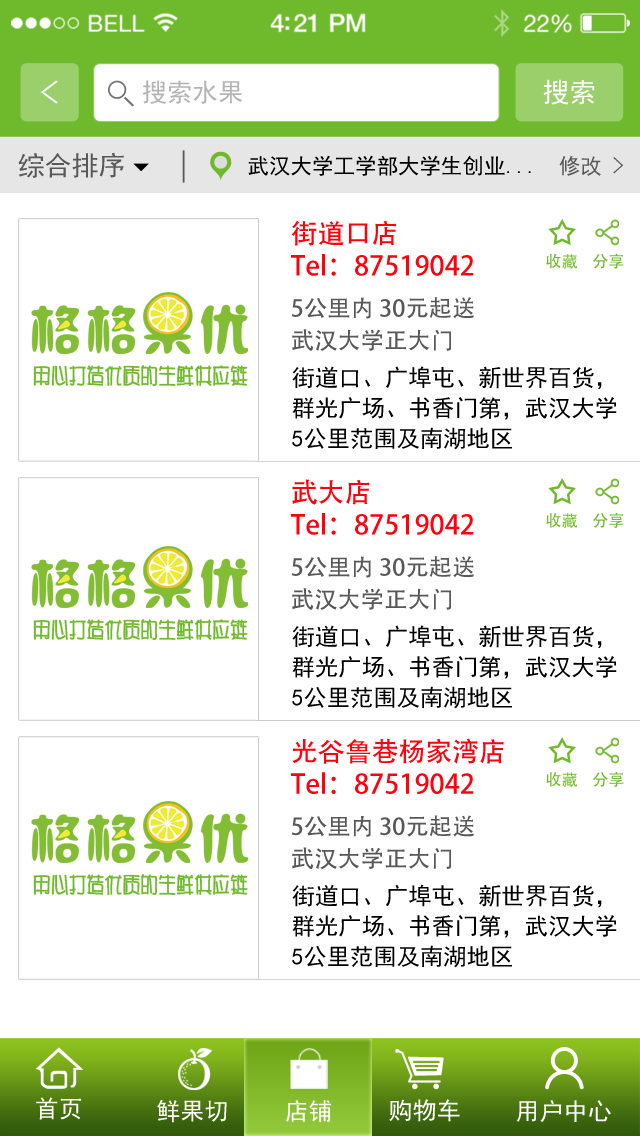
<style>
.page{position:relative;width:640px;height:1136px;background:#ffffff}
.page>*{position:absolute;margin:0}
.t1{font:32.3px "SimHei";color:#ffffff;scale:1.23 1}
.t2{font:25.5px "SimHei";color:#b4b4b4}
.t3{font:26.9px "SimHei";color:#ffffff}
.t4{font:26.9px "SimHei";color:#595757}
.t5{font:21.5px "SimHei";color:#000000}
.t6{font:21.5px "SimHei";color:#595757}
.t7{font:23.3px "SimHei";color:#595757}
.t8{font:26.9px "AdobeHeitiStd-Regular";color:#ff000c}
.t9{font:16.1px "AdobeHeitiStd-Regular";color:#6fba2c}
.t10{font:23.3px "AdobeHeitiStd-Regular";color:#595757}
.t11{font:21.5px "HYr2gj";color:#6fba2c;font-weight:bold;scale:0.81 1}
.t12{font:23.3px/30.5px "SimHei";color:#000000}
.t13{font:24.1px "SimHei";color:#ffffff}
</style>
<div class="page">
<p class="t1" style="left:40px;top:80px;width:18px;height:24px">&lt;</p>
<p class="t2" style="left:142px;top:80px;width:100px;height:24px">搜索水果</p>
<p class="t3" style="left:543px;top:79px;width:52px;height:26px">搜索</p>
<p class="t4" style="left:18px;top:152px;width:106px;height:26px">综合排序</p>
<p class="t5" style="left:248px;top:155px;width:283px;height:21px">武汉大学工学部大学生创业...</p>
<p class="t6" style="left:559px;top:155px;width:65px;height:21px">修改 <span class="t7">&gt;</span></p>
<p class="t8" style="left:291px;top:220px;width:183px;height:56px">街道口店  <br>Tel：87519042</p>
<p class="t9" style="left:546px;top:253px;width:32px;height:16px">收藏</p>
<p class="t9" style="left:593px;top:253px;width:31px;height:16px">分享</p>
<p class="t10" style="left:291px;top:297px;width:183px;height:22px">5公里内 30元起送</p>
<p class="t10" style="left:292px;top:329px;width:159px;height:22px">武汉大学正大门</p>
<p class="t11" style="left:33px;top:365px;width:215px;height:21px">用心打造优质的生鲜供应链</p>
<p class="t12" style="left:292px;top:366px;width:325px;height:84px">街道口、广埠屯、新世界百货，<br>群光广场、书香门第，武汉大学<br>5公里范围及南湖地区</p>
<p class="t8" style="left:291px;top:479px;width:183px;height:56px">武大店  <br>Tel：87519042</p>
<p class="t9" style="left:546px;top:513px;width:32px;height:15px">收藏</p>
<p class="t9" style="left:593px;top:513px;width:31px;height:15px">分享</p>
<p class="t10" style="left:291px;top:556px;width:183px;height:22px">5公里内 30元起送</p>
<p class="t10" style="left:292px;top:588px;width:159px;height:22px">武汉大学正大门</p>
<p class="t11" style="left:33px;top:619px;width:215px;height:21px">用心打造优质的生鲜供应链</p>
<p class="t12" style="left:292px;top:625px;width:325px;height:84px">街道口、广埠屯、新世界百货，<br>群光广场、书香门第，武汉大学<br>5公里范围及南湖地区</p>
<p class="t8" style="left:291px;top:738px;width:213px;height:56px">光谷鲁巷杨家湾店<br>Tel：87519042</p>
<p class="t9" style="left:546px;top:772px;width:32px;height:15px">收藏</p>
<p class="t9" style="left:593px;top:772px;width:31px;height:15px">分享</p>
<p class="t10" style="left:291px;top:815px;width:183px;height:22px">5公里内 30元起送</p>
<p class="t10" style="left:292px;top:847px;width:159px;height:23px">武汉大学正大门</p>
<p class="t11" style="left:33px;top:874px;width:215px;height:21px">用心打造优质的生鲜供应链</p>
<p class="t12" style="left:292px;top:884px;width:325px;height:84px">街道口、广埠屯、新世界百货，<br>群光广场、书香门第，武汉大学<br>5公里范围及南湖地区</p>
<p class="t13" style="left:36px;top:1097px;width:45px;height:23px">首页</p>
<p class="t13" style="left:157px;top:1099px;width:70px;height:24px">鲜果切</p>
<p class="t13" style="left:286px;top:1100px;width:45px;height:22px">店铺</p>
<p class="t13" style="left:389px;top:1099px;width:71px;height:23px">购物车</p>
<p class="t13" style="left:516px;top:1100px;width:95px;height:22px">用户中心</p>
</div>
